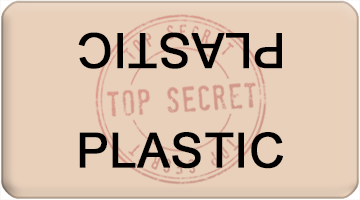
<style>
.page{position:relative;width:360px;height:200px;background:#e8d0bb}
.page>*{position:absolute;margin:0}
.t1{font:48px "ArialMT";color:#000000;font-weight:bold}
</style>
<div class="page">
<p class="t1" style="left:78px;top:32px;width:204px;height:37px;rotate:180deg">PLASTIC</p>
<p class="t1" style="left:79px;top:132px;width:204px;height:37px">PLASTIC</p>
</div>
